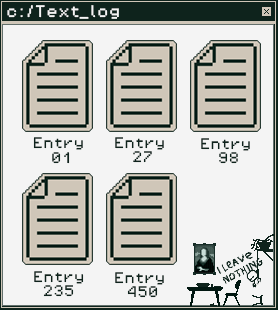
<style>
.page{position:relative;width:278px;height:310px;background:#f4f4f4}
.page>*{position:absolute;margin:0}
.t1{font:13.5px "PixelOperator8";color:#f4f4f4}
.t2{font:12.1px "PixelOperator8";color:#0e231c}
</style>
<div class="page">
<p class="t1" style="left:7px;top:5px;width:112px;height:14px">c:/Text_log</p>
<p class="t2" style="left:33px;top:137px;width:50px;height:27px;text-align:center">Entry <br>01</p>
<p class="t2" style="left:115px;top:137px;width:49px;height:26px;text-align:center">Entry <br>27</p>
<p class="t2" style="left:201px;top:138px;width:49px;height:26px;text-align:center">Entry <br>98</p>
<p class="t2" style="left:34px;top:271px;width:50px;height:26px;text-align:center">Entry<br>235</p>
<p class="t2" style="left:115px;top:272px;width:49px;height:26px;text-align:center">Entry <br>450</p>
</div>
